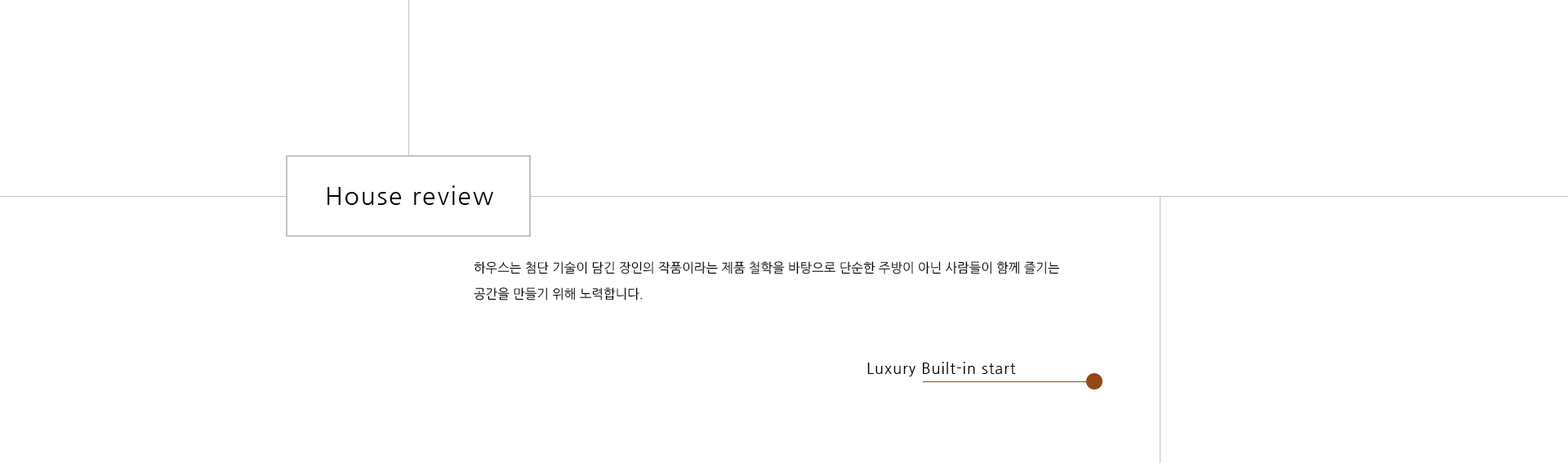
<style>
.page{position:relative;width:1568px;height:463px;background:#ffffff}
.page>*{position:absolute;margin:0}
.t1{font:24.5px "NanumGothic";letter-spacing:0.06em;color:#000000}
.t2{font:13.1px/26.1px "NanumGothic";color:#000000}
.t3{font:14.7px "NanumGothic";letter-spacing:0.06em;color:#000000}
</style>
<div class="page">
<p class="t1" style="left:327px;top:185px;width:166px;height:20px">House review</p>
<p class="t2" style="left:474px;top:261px;width:586px;height:40px">하우스는 첨단 기술이 담긴 장인의 작품이라는 제품 철학을 바탕으로 단순한 주방이 아닌 사람들이 함께 즐기는 공간을 만들기 위해 노력합니다.</p>
<p class="t3" style="left:867px;top:362px;width:149px;height:14px">Luxury Built-in start</p>
</div>
